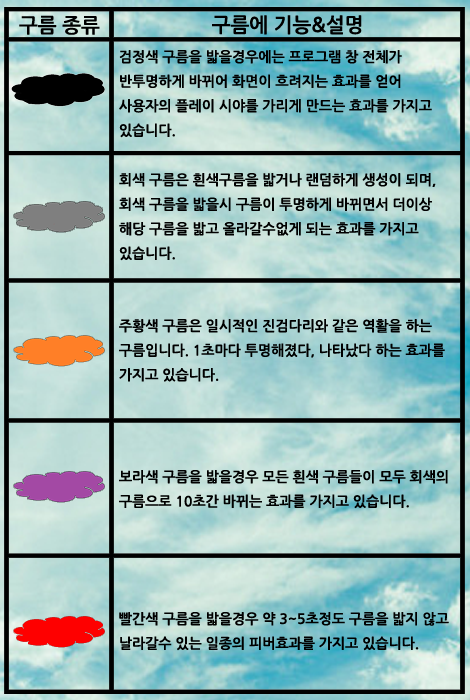
<style>
.page{position:relative;width:470px;height:700px}
.page>*{position:absolute;margin:0}
.t1{font:20px "NanumGothicBold";color:#000000}
.t2{font:14px "NanumGothicBold";color:#000000}
</style>
<div class="page">
<p class="t1" style="left:19px;top:15px;width:81px;height:20px">구름 종류</p>
<p class="t1" style="left:212px;top:15px;width:150px;height:20px">구름에 기능&amp;설명</p>
<p class="t2" style="left:119px;top:50px;width:313px;height:88px">검정색 구름을 밟을경우에는 프로그램 창 전체가<br>반투명하게 바뀌어 화면이 흐려지는 효과를 얻어<br>사용자의 플레이 시야를 가리게 만드는 효과를 가지고 있습니다.</p>
<p class="t2" style="left:119px;top:173px;width:317px;height:88px">회색 구름은 흰색구름을 밟거나 랜덤하게 생성이 되며,<br>회색 구름을 밟을시 구름이 투명하게 바뀌면서 더이상<br>해당 구름을 밟고 올라갈수없게 되는 효과를 가지고 있습니다.</p>
<p class="t2" style="left:119px;top:319px;width:326px;height:63px">주황색 구름은 일시적인 진검다리와 같은 역활을 하는 구름입니다. 1초마다 투명해졌다, 나타났다 하는 효과를 가지고 있습니다.</p>
<p class="t2" style="left:119px;top:470px;width:329px;height:39px">보라색 구름을 밟을경우 모든 흰색 구름들이 모두 회색의 구름으로 10초간 바뀌는 효과를 가지고 있습니다.</p>
<p class="t2" style="left:119px;top:612px;width:330px;height:39px">빨간색 구름을 밟을경우 약 3~5초정도 구름을 밟지 않고 날라갈수 있는 일종의 피버효과를 가지고 있습니다.</p>
</div>
